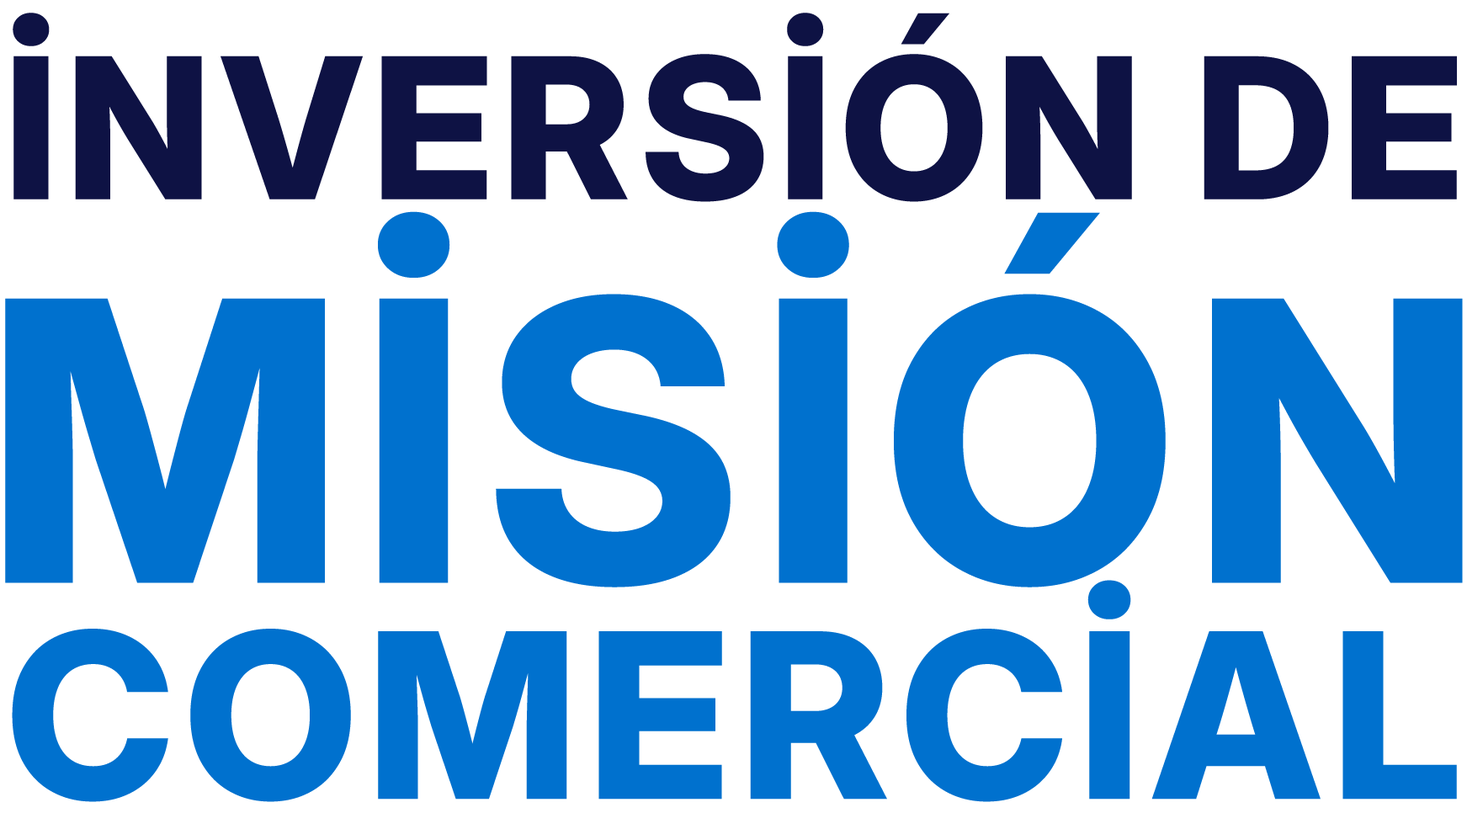
<style>
.page{position:relative;width:1467px;height:813px;background:#ffffff}
.page>*{position:absolute;margin:0}
.t1{font:196.4px/326px "Inter28pt-ExtraBold";letter-spacing:0.026em;color:#0e1244;text-transform:uppercase}
.t2{font:390.4px/383.4px "Inter28pt-ExtraBold";letter-spacing:0.026em;color:#0071ce;text-transform:uppercase}
.t3{font:230.3px/216.2px "Inter28pt-ExtraBold";letter-spacing:0.026em;color:#0071ce;text-transform:uppercase}
</style>
<div class="page">
<p class="t1" style="left:5px;top:13px;width:1458px;height:789px;text-align:center">inversión de<br><span class="t2">misión <br></span><span class="t3">comercial</span></p>
</div>
